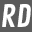
<style>
.page{position:relative;width:32px;height:32px;background:#5b5b5b}
.page>*{position:absolute;margin:0}
.t1{font:30px "ContrailOne-Regular";color:#ffffff}
</style>
<div class="page">
<p class="t1" style="left:2px;top:4px;width:29px;height:23px">RD</p>
</div>
